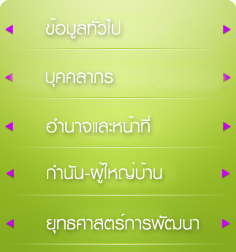
<style>
.page{position:relative;width:236px;height:252px}
.page>*{position:absolute;margin:0}
.t1{font:26px "KittithadaLight45F";color:#fcfcfb}
</style>
<div class="page">
<p class="t1" style="left:46px;top:17px;width:75px;height:22px">ข้อมูลทั่วไป</p>
<p class="t1" style="left:46px;top:72px;width:67px;height:15px">บุคคลากร</p>
<p class="t1" style="left:46px;top:115px;width:104px;height:18px">อำนาจและหน้าที่</p>
<p class="t1" style="left:47px;top:162px;width:115px;height:22px">กำนัน-ผู้ใหญ่บ้าน</p>
<p class="t1" style="left:46px;top:213px;width:153px;height:21px">ยุทธศาสตร์การพัฒนา</p>
</div>
